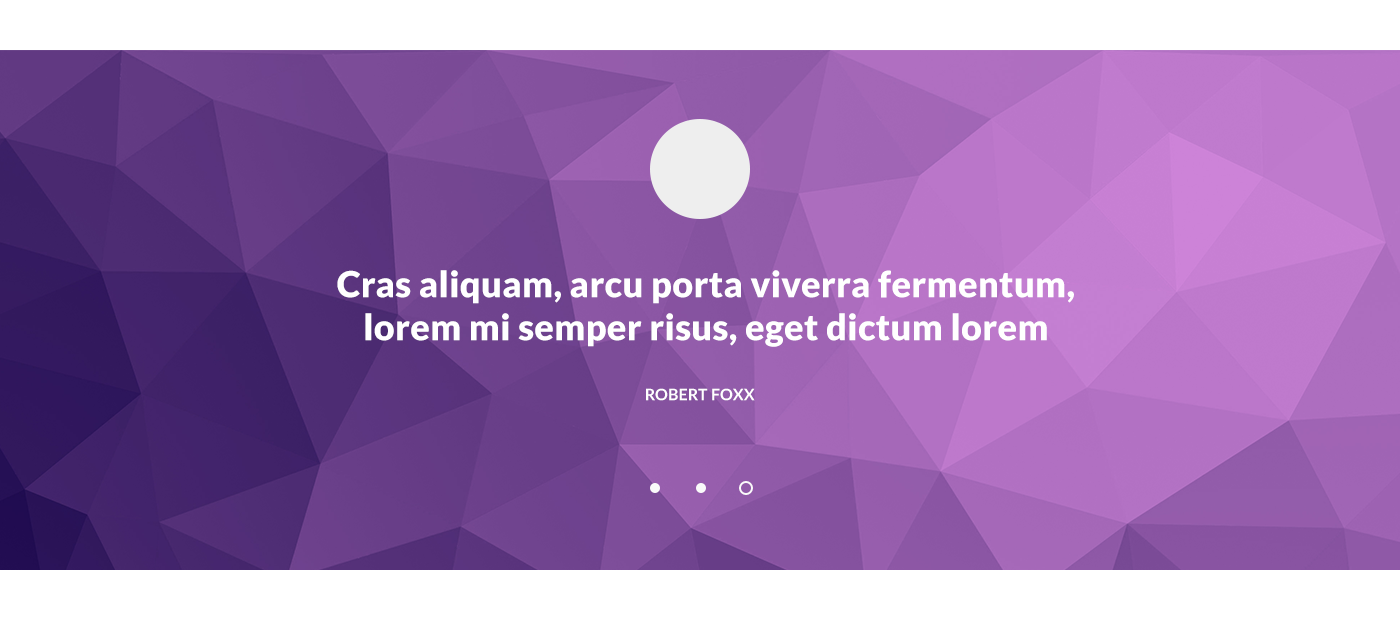
<style>
.page{position:relative;width:1400px;height:620px}
.page>*{position:absolute;margin:0}
.t1{font:36px "Lato-Black";letter-spacing:0.01em;color:#ffffff}
.t2{font:16px "Lato-Bold";letter-spacing:0.01em;color:#ffffff}
</style>
<div class="page">
<p class="t1" style="left:337px;top:270px;width:737px;height:77px;text-align:center">Cras aliquam, arcu porta viverra fermentum, lorem mi semper risus, eget dictum lorem mauris id justo</p>
<p class="t2" style="left:646px;top:388px;width:109px;height:13px">ROBERT FOXX</p>
</div>
